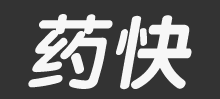
<style>
.page{position:relative;width:220px;height:99px;background:#333333}
.page>*{position:absolute;margin:0}
.t1{font:81px "FZY4JW--GB1-0";letter-spacing:0.025em;color:#ffffff;font-style:italic}
</style>
<div class="page">
<p class="t1" style="left:28px;top:14px;width:164px;height:76px;opacity:0.96">药快</p>
</div>
